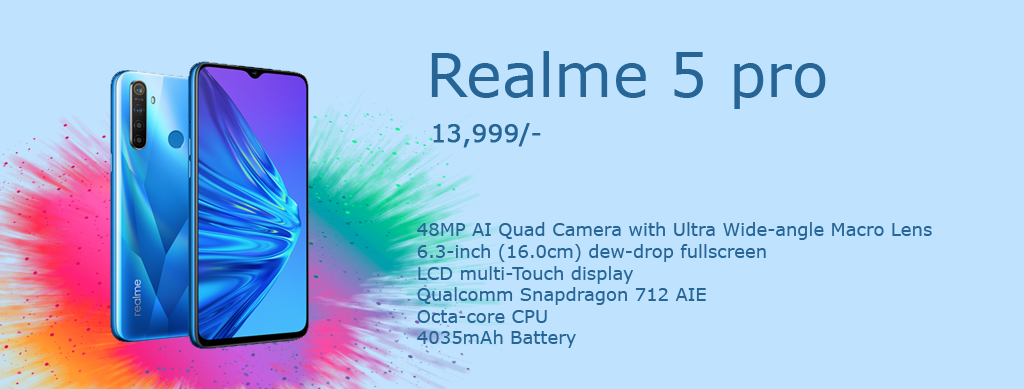
<style>
.page{position:relative;width:1024px;height:389px;background:#bfe3fe}
.page>*{position:absolute;margin:0}
.t1{font:60px "Verdana";color:#266596}
.t2{font:24px "Verdana";color:#266596;font-weight:bold}
.t3{font:18px "Verdana";color:#266596}
</style>
<div class="page">
<p class="t1" style="left:431px;top:51px;width:395px;height:58px">Realme 5 pro</p>
<p class="t2" style="left:433px;top:123px;width:108px;height:25px">13,999/-</p>
<p class="t3" style="left:417px;top:222px;width:515px;height:126px">48MP AI Quad Camera with Ultra Wide-angle Macro Lens<br>6.3-inch (16.0cm) dew-drop fullscreen<br>LCD multi-Touch display<br>Qualcomm Snapdragon 712 AIE<br>Octa-core CPU<br>4035mAh Battery</p>
</div>
